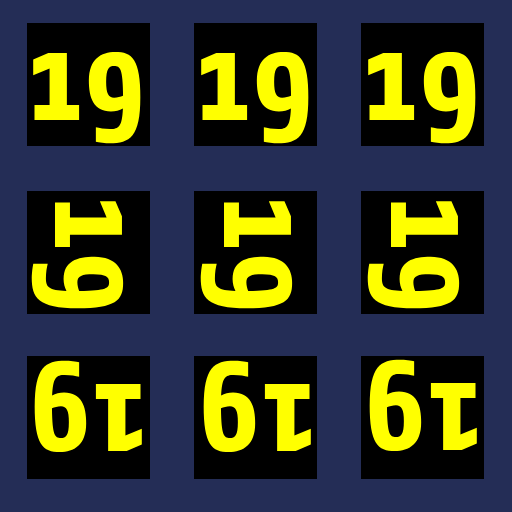
<style>
.page{position:relative;width:512px;height:512px;background:#242d56}
.page>*{position:absolute;margin:0}
.t1{font:130px "Share-BoldOSF";color:#ffff00}
</style>
<div class="page">
<p class="t1" style="left:33px;top:51px;width:108px;height:93px">19</p>
<p class="t1" style="left:201px;top:51px;width:108px;height:93px">19</p>
<p class="t1" style="left:368px;top:51px;width:108px;height:93px">19</p>
<p class="t1" style="left:31px;top:201px;width:93px;height:108px;rotate:90deg">19</p>
<p class="t1" style="left:200px;top:201px;width:93px;height:108px;rotate:90deg">19</p>
<p class="t1" style="left:367px;top:201px;width:93px;height:108px;rotate:90deg">19</p>
<p class="t1" style="left:34px;top:360px;width:108px;height:93px;rotate:-180deg">19</p>
<p class="t1" style="left:203px;top:360px;width:108px;height:93px;rotate:-180deg">19</p>
<p class="t1" style="left:369px;top:359px;width:108px;height:93px;rotate:-180deg">19</p>
</div>
